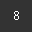
<style>
.page{position:relative;width:32px;height:32px;background:#333333}
.page>*{position:absolute;margin:0}
.t1{font:12px "CenturySchoolbook";letter-spacing:0.06em;color:#ffffff}
</style>
<div class="page">
<p class="t1" style="left:14px;top:11px;width:5px;height:9px">8</p>
</div>
